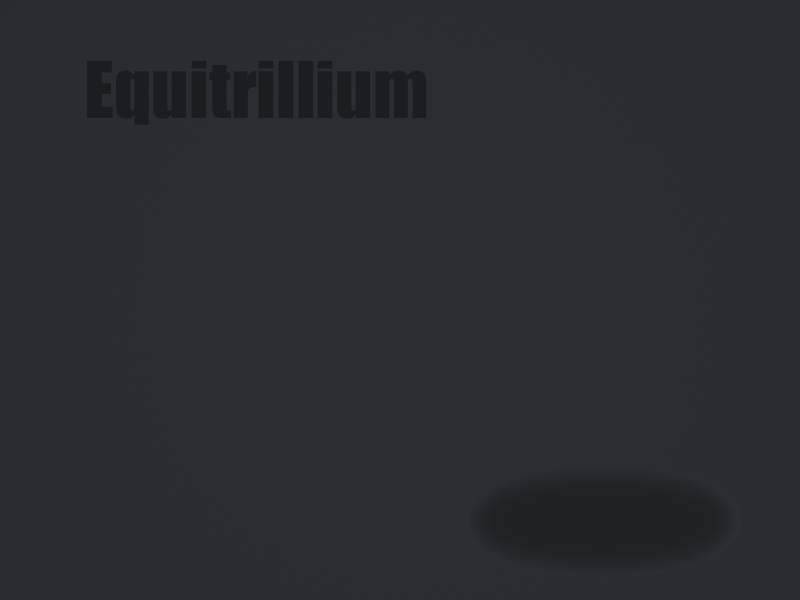
<style>
.page{position:relative;width:800px;height:600px;background:#2b2d33}
.page>*{position:absolute;margin:0}
.t1{font:72px "Impact";color:#1b1d20}
</style>
<div class="page">
<p class="t1" style="left:87px;top:61px;width:340px;height:64px">Equitrillium</p>
</div>
